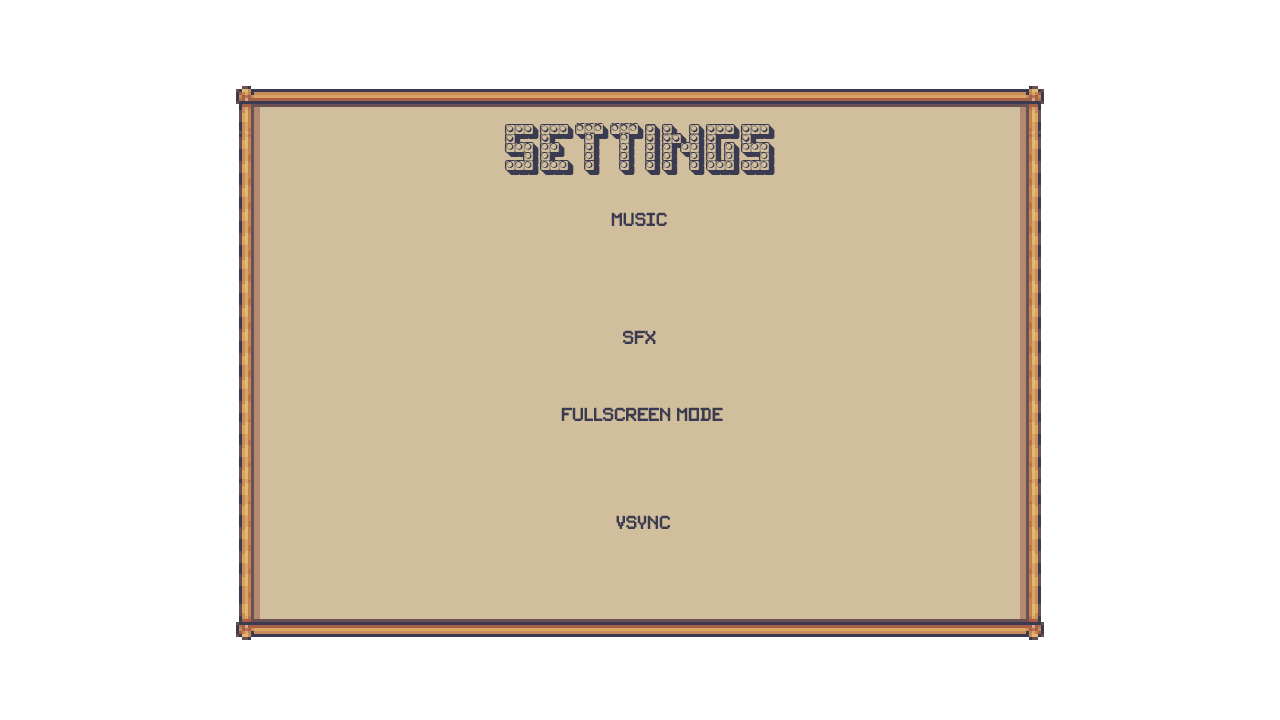
<style>
.page{position:relative;width:1280px;height:720px;background:#ffffff}
.page>*{position:absolute;margin:0}
.t1{font:66.7px "Toys-Regular";color:#3a3a50}
.t2{font:16.7px "PixelSplitter-Bold";color:#3a3a50}
</style>
<div class="page">
<p class="t1" style="left:504px;top:123px;width:271px;height:52px">SETTINGS</p>
<p class="t2" style="left:611px;top:212px;width:56px;height:14px">Music</p>
<p class="t2" style="left:623px;top:330px;width:33px;height:14px">SFX</p>
<p class="t2" style="left:561px;top:407px;width:162px;height:14px">fullscreen mode</p>
<p class="t2" style="left:616px;top:515px;width:54px;height:14px">VSYNC</p>
</div>
